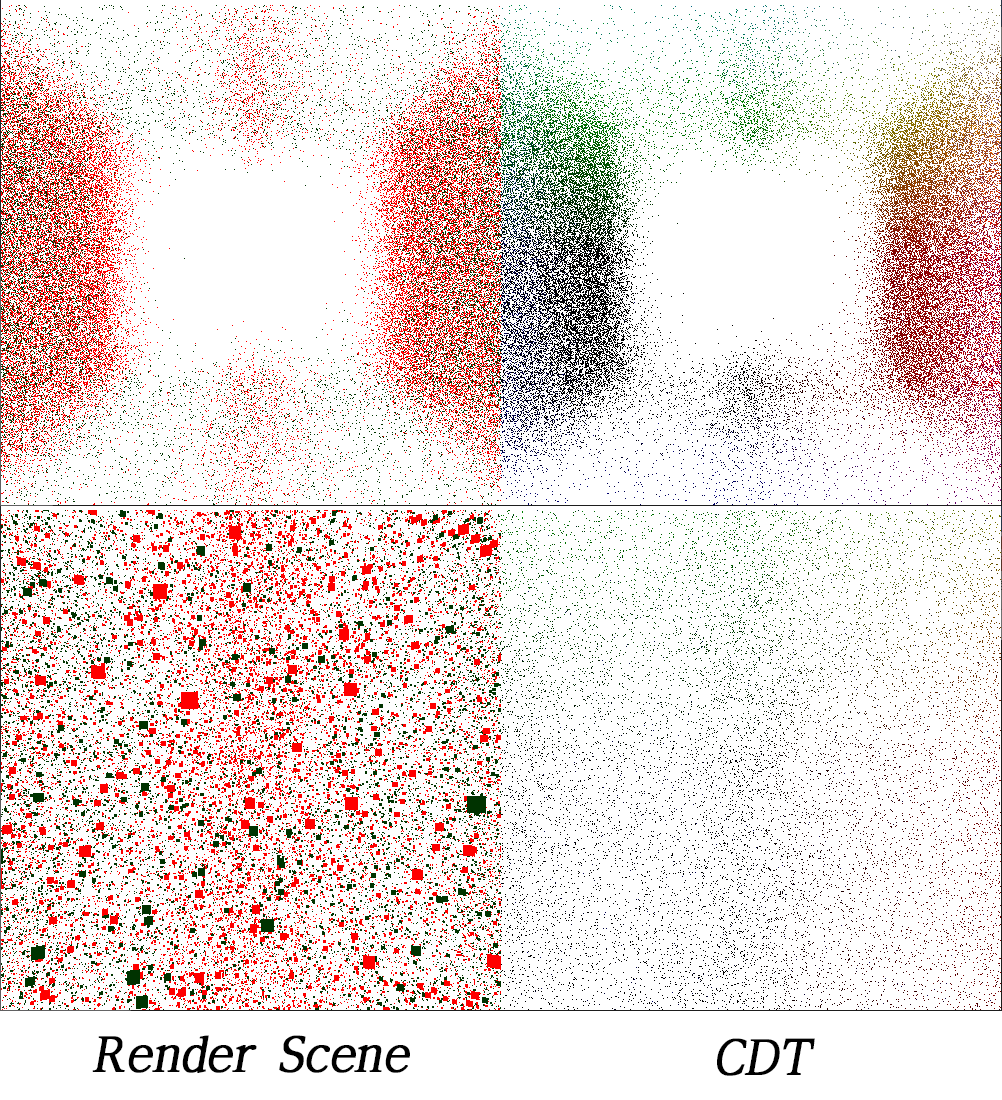
<style>
.page{position:relative;width:1002px;height:1100px;background:#ffffff}
.page>*{position:absolute;margin:0}
.t1{font:48px "ÈÞ¸Õ¸íÁ¶";color:#000000;font-weight:bold;font-style:italic}
</style>
<div class="page">
<p class="t1" style="left:92px;top:1035px;width:318px;height:38px">Render Scene</p>
<p class="t1" style="left:717px;top:1038px;width:98px;height:38px">CDT</p>
</div>
